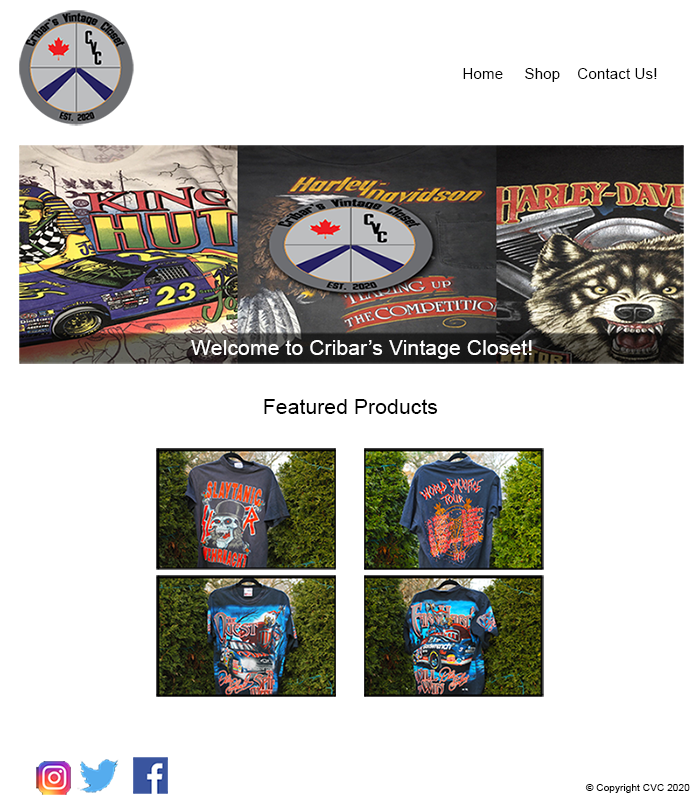
<style>
.page{position:relative;width:700px;height:797px;background:#ffffff}
.page>*{position:absolute;margin:0}
.t1{font:15.3px "ArialMT";color:#000000}
.t2{font:21.3px "ArialMT";color:#ffffff}
.t3{font:21.3px "ArialMT";color:#000000}
.t4{font:10.2px "ArialMT";color:#000000}
</style>
<div class="page">
<p class="t1" style="left:463px;top:68px;width:194px;height:14px">Home     Shop    Contact Us!</p>
<p class="t2" style="left:191px;top:340px;width:341px;height:19px">Welcome to Cribar’s Vintage Closet!</p>
<p class="t3" style="left:264px;top:399px;width:174px;height:15px">Featured Products</p>
<p class="t4" style="left:585px;top:784px;width:105px;height:9px">© Copyright CVC 2020</p>
</div>
